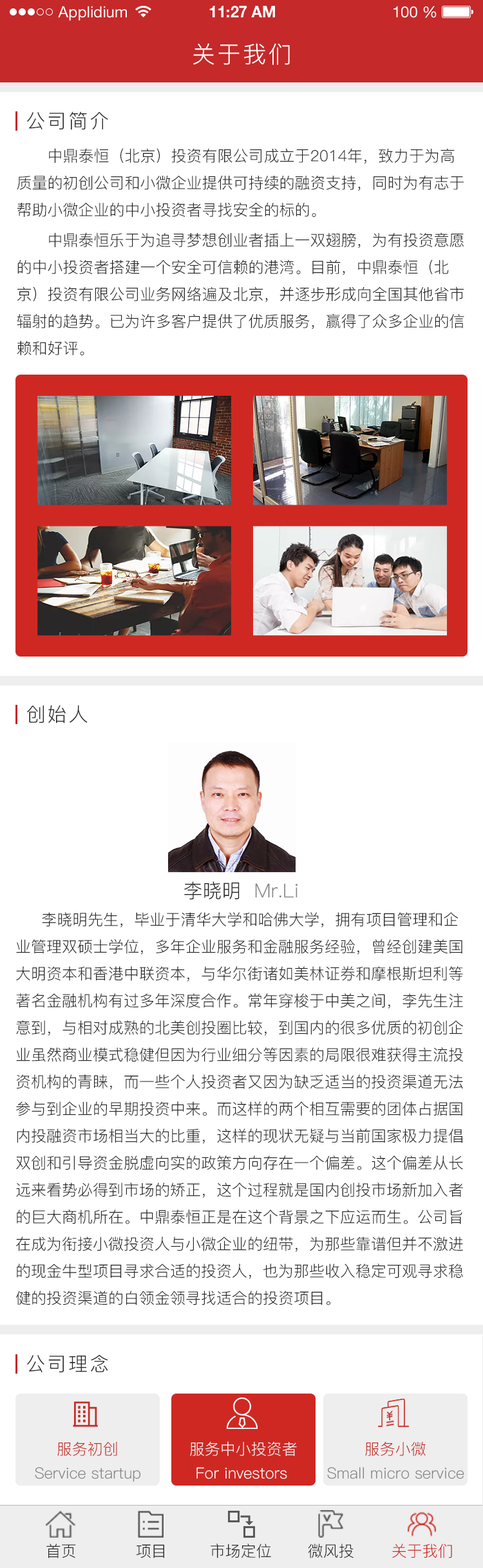
<style>
.page{position:relative;width:483px;height:1568px;background:#ffffff}
.page>*{position:absolute;margin:0}
.t1{font:15.4px "HelveticaNeueLTStd-Roman";color:#ffffff}
.t2{font:15.4px "HelveticaNeueLTStd-Bd";color:#ffffff}
.t3{font:23.2px "PingFang-SC-Regular";letter-spacing:0.1em;color:#ffffff;text-transform:uppercase}
.t4{font:19.3px "PingFang-SC-Regular";letter-spacing:0.1em;color:#282828;text-transform:uppercase}
.t5{font:15.4px "PingFang-SC-Regular";color:#282828}
.t6{font:19.3px "PingFang-SC-Regular";color:#888888}
.t7{font:19.3px "PingFang-SC-Regular";color:#282828}
.t8{font:9px "MicrosoftYaHei";color:#282828}
.t9{font:15.4px "PingFang-SC-Regular";color:#c52d28}
.t10{font:15.4px "PingFang-SC-Regular";color:#eeeeee}
.t11{font:15.4px "PingFang-SC-Regular";color:#848484}
.t12{font:15.4px "PingFang-SC-Regular";color:#f8f8f8}
.t13{font:15.4px "PingFang-SC-Regular";color:#cf2823}
</style>
<div class="page">
<p class="t1" style="left:58px;top:6px;width:69px;height:15px">Applidium</p>
<p class="t2" style="left:209px;top:6px;width:66px;height:11px">11:27 AM</p>
<p class="t1" style="left:393px;top:6px;width:43px;height:12px">100 %</p>
<p class="t3" style="left:193px;top:43px;width:97px;height:22px">关于我们</p>
<p class="t4" style="left:26px;top:111px;width:82px;height:19px">公司简介</p>
<p class="t5" style="left:17px;top:148px;width:446px;height:69px">中鼎泰恒（北京）投资有限公司成立于2014年，致力于为高质量的初创公司和小微企业提供可持续的融资支持，同时为有志于帮助小微企业的中小投资者寻找安全的标的。</p>
<p class="t5" style="left:17px;top:232px;width:447px;height:123px">中鼎泰恒乐于为追寻梦想创业者插上一双翅膀，为有投资意愿的中小投资者搭建一个安全可信赖的港湾。目前，中鼎泰恒（北京）投资有限公司业务网络遍及北京，并逐步形成向全国其他省市辐射的趋势。已为许多客户提供了优质服务，赢得了众多企业的信赖和好评。</p>
<p class="t4" style="left:27px;top:705px;width:61px;height:18px">创始人</p>
<p class="t6" style="left:184px;top:881px;width:113px;height:19px"><span class="t7">李晓明 </span> Mr.Li</p>
<p class="t5" style="left:16px;top:912px;width:447px;height:393px"><span class="t8">  </span>    李晓明先生，毕业于清华大学和哈佛大学，拥有项目管理和企业管理双硕士学位，多年企业服务和金融服务经验，曾经创建美国大明资本和香港中联资本，与华尔街诸如美林证券和摩根斯坦利等著名金融机构有过多年深度合作。常年穿梭于中美之间，李先生注意到，与相对成熟的北美创投圈比较，到国内的很多优质的初创企业虽然商业模式稳健但因为行业细分等因素的局限很难获得主流投资机构的青睐，而一些个人投资者又因为缺乏适当的投资渠道无法参与到企业的早期投资中来。而这样的两个相互需要的团体占据国内投融资市场相当大的比重，这样的现状无疑与当前国家极力提倡双创和引导资金脱虚向实的政策方向存在一个偏差。这个偏差从长远来看势必得到市场的矫正，这个过程就是国内创投市场新加入者的巨大商机所在。中鼎泰恒正是在这个背景之下应运而生。公司旨在成为衔接小微投资人与小微企业的纽带，为那些靠谱但并不激进的现金牛型项目寻求合适的投资人，也为那些收入稳定可观寻求稳健的投资渠道的白领金领寻找适合的投资项目。</p>
<p class="t4" style="left:26px;top:1355px;width:82px;height:17px">公司理念</p>
<p class="t9" style="left:57px;top:1442px;width:60px;height:14px">服务初创</p>
<p class="t10" style="left:190px;top:1441px;width:107px;height:15px">服务中小投资者</p>
<p class="t9" style="left:365px;top:1441px;width:60px;height:15px">服务小微</p>
<p class="t11" style="left:35px;top:1467px;width:105px;height:15px">Service startup</p>
<p class="t12" style="left:196px;top:1467px;width:91px;height:12px">For investors</p>
<p class="t11" style="left:327px;top:1467px;width:137px;height:12px">Small micro service</p>
<p class="t5" style="left:46px;top:1544px;width:30px;height:14px">首页</p>
<p class="t5" style="left:136px;top:1544px;width:28px;height:14px">项目</p>
<p class="t5" style="left:210px;top:1544px;width:61px;height:14px">市场定位</p>
<p class="t5" style="left:308px;top:1544px;width:45px;height:14px">微风投</p>
<p class="t13" style="left:392px;top:1544px;width:60px;height:14px">关于我们</p>
</div>
